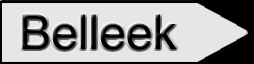
<style>
.page{position:relative;width:254px;height:64px;background:#e6e6e6}
.page>*{position:absolute;margin:0}
.t1{font:48px "ArialMT";color:#000000}
</style>
<div class="page">
<p class="t1" style="left:22px;top:14px;width:155px;height:36px">Belleek</p>
</div>
